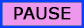
<style>
.page{position:relative;width:84px;height:28px;background:#ee98ed}
.page>*{position:absolute;margin:0}
.t1{font:17px "Verdana";color:#000000;font-weight:bold}
</style>
<div class="page">
<p class="t1" style="left:14px;top:7px;width:57px;height:13px">PAUSE</p>
</div>
